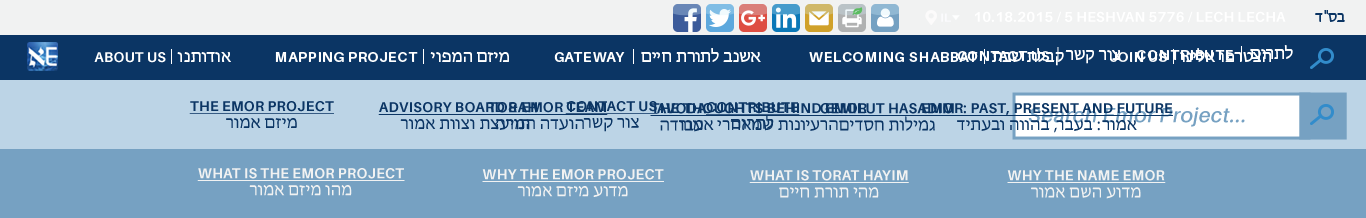
<style>
.page{position:relative;width:1366px;height:218px;background:#76a1c2}
.page>*{position:absolute;margin:0}
.t1{font:12px "Aileron-Bold";letter-spacing:0.02em;color:#fbfbfd;text-transform:uppercase}
.t2{font:14px "Aileron-Bold";letter-spacing:0.02em;color:#ffffff;text-transform:uppercase}
.t3{font:15.4px "MyriadHebrew-Regular";color:#0b3564;text-transform:uppercase}
.t4{font:15.4px "Aileron-Regular";color:#0b3564;text-transform:uppercase}
.t5{font:14px "Aileron-Bold";letter-spacing:0.025em;color:#ffffff}
.t6{font:17.7px "MyriadHebrew-Regular";color:#ffffff;text-transform:uppercase}
.t7{font:14px "Aileron-Bold";letter-spacing:0.05em;color:#ffffff;text-transform:uppercase}
.t8{font:13.8px "Aileron-Bold";letter-spacing:0.025em;color:#ffffff;text-transform:uppercase}
.t9{font:17.5px "MyriadHebrew-Regular";color:#ffffff;text-transform:uppercase}
.t10{font:14.2px/16.9px "Aileron-Bold";letter-spacing:0.025em;color:#0b3564;text-transform:uppercase;text-decoration:underline}
.t11{font:18px/16.9px "MyriadHebrew-Regular";color:#0b3564;text-transform:uppercase}
.t12{font:14.2px "Aileron-Bold";letter-spacing:0.025em;color:#0b3564;text-transform:uppercase;text-decoration:underline}
.t13{font:14.4px/17.1px "Aileron-Bold";letter-spacing:0.025em;color:#f1f2f2;text-transform:uppercase;text-decoration:underline}
.t14{font:18.2px/17.1px "MyriadHebrew-Regular";color:#f1f2f2;text-transform:uppercase}
.t15{font:14.4px "Aileron-Bold";letter-spacing:0.025em;color:#f1f2f2;text-transform:uppercase;text-decoration:underline}
</style>
<div class="page">
<p class="t1" style="left:941px;top:13px;width:10px;height:9px">IL</p>
<p class="t2" style="left:975px;top:11px;width:311px;height:12px">10.18.2015 / 5 Heshvan 5776 / Lech Lecha</p>
<p class="t3" style="left:1315px;top:10px;width:30px;height:12px">ד<span class="t4">"</span>סב</p>
<p class="t5" style="left:94px;top:52px;width:72px;height:11px">ABOUT US</p>
<p class="t6" style="left:177px;top:52px;width:54px;height:10px">אודותנו</p>
<p class="t7" style="left:275px;top:52px;width:143px;height:10px">mapping project</p>
<p class="t6" style="left:430px;top:51px;width:79px;height:11px">מיזם המפוי</p>
<p class="t7" style="left:554px;top:52px;width:71px;height:10px">Gateway</p>
<p class="t6" style="left:641px;top:48px;width:120px;height:14px">אשנב לתורת חיים</p>
<p class="t7" style="left:809px;top:52px;width:169px;height:10px">WelComing Shabbat</p>
<p class="t6" style="left:992px;top:48px;width:72px;height:18px">קבלת שבת</p>
<p class="t8" style="left:1110px;top:52px;width:57px;height:10px">JOIN US</p>
<p class="t9" style="left:1180px;top:48px;width:91px;height:14px">הצטרפו אלינו</p>
<p class="t10" style="left:189px;top:101px;width:145px;height:27px;text-align:center">The Emor Project<br><span class="t11">מיזם אמור</span></p>
<p class="t12" style="left:378px;top:102px;width:230px;height:28px;text-align:center">Advisory board &amp; emor team<br><span class="t11">הועדה המיעצת וצוות אמור</span></p>
<p class="t12" style="left:650px;top:103px;width:218px;height:28px;text-align:center">The thoughts behind emor<br><span class="t11">הרעיונות שמאחרי אמור</span></p>
<p class="t12" style="left:920px;top:103px;width:253px;height:30px;text-align:center">Emor: Past, Present and Future<br><span class="t11">אמור: בעבר, בהווה ובעתיד</span></p>
<p class="t13" style="left:197px;top:168px;width:208px;height:28px;text-align:center">What is The Emor Project<br><span class="t14">מהו מיזם אמור</span></p>
<p class="t15" style="left:482px;top:169px;width:182px;height:28px;text-align:center">Why the Emor Project<br><span class="t14">מדוע מיזם אמור</span></p>
<p class="t15" style="left:749px;top:170px;width:160px;height:28px;text-align:center">What is Torat Hayim<br><span class="t14">מהי תורת חיים</span></p>
<p class="t15" style="left:1007px;top:170px;width:159px;height:29px;text-align:center">Why the Name Emor<br><span class="t14">מדוע השם אמור</span></p>
</div>
